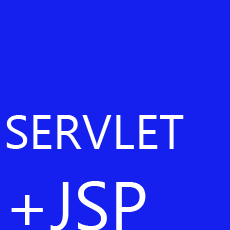
<style>
.page{position:relative;width:230px;height:230px;background:#151fee}
.page>*{position:absolute;margin:0}
.t1{font:48px "Leelawadee";color:#ffffff}
.t2{font:67.7px "Leelawadee";color:#ffffff}
</style>
<div class="page">
<p class="t1" style="left:6px;top:115px;width:178px;height:116px">SERVLET<br><span class="t2">+JSP</span></p>
</div>
